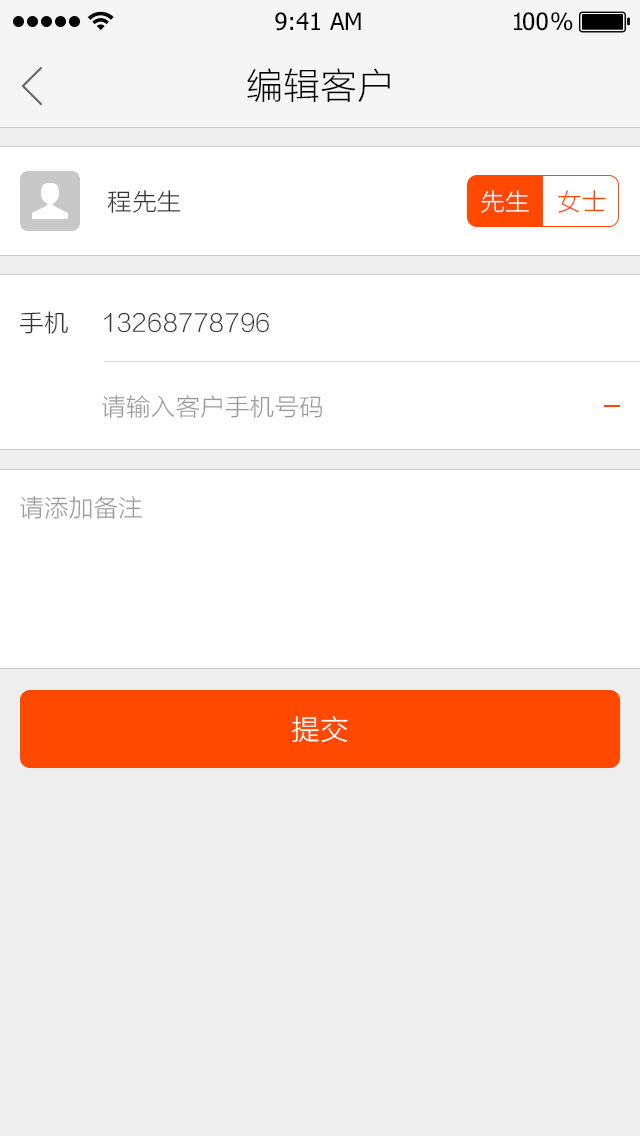
<style>
.page{position:relative;width:640px;height:1136px;background:#ffffff}
.page>*{position:absolute;margin:0}
.t1{font:24px "Tahoma";color:#000000}
.t2{font:24px "Tahoma";letter-spacing:-0.1em;color:#000000}
.t3{font:24px "Tahoma";letter-spacing:-0.25em;color:#000000}
.t4{font:36px "STHeitiSC-Light";color:#000000}
.t5{font:24px "STHeitiSC-Light";color:#333333}
.t6{font:24px "STHeitiSC-Light";color:#ffffff}
.t7{font:24px "STHeitiSC-Light";color:#ff4800}
.t8{font:24px "STHeitiSC-Light";color:#999999}
.t9{font:28px "STHeitiSC-Light";color:#ffffff}
</style>
<div class="page">
<p class="t1" style="left:275px;top:12px;width:86px;height:19px">9:41 AM</p>
<p class="t2" style="left:514px;top:12px;width:59px;height:19px">1<span class="t1">0</span><span class="t3">0 </span>%</p>
<p class="t4" style="left:247px;top:68px;width:143px;height:34px">编辑客户</p>
<p class="t5" style="left:107px;top:190px;width:74px;height:23px">程先生</p>
<p class="t6" style="left:481px;top:190px;width:48px;height:23px">先生</p>
<p class="t7" style="left:558px;top:190px;width:48px;height:23px">女士</p>
<p class="t5" style="left:19px;top:311px;width:49px;height:23px">手机</p>
<p class="t5" style="left:104px;top:312px;width:165px;height:21px">13268778796</p>
<p class="t8" style="left:102px;top:395px;width:220px;height:23px">请输入客户手机号码</p>
<p class="t8" style="left:20px;top:496px;width:122px;height:23px">请添加备注</p>
<p class="t9" style="left:292px;top:716px;width:56px;height:27px">提交</p>
</div>
